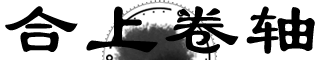
<style>
.page{position:relative;width:320px;height:60px;background:#ffffff}
.page>*{position:absolute;margin:0}
.t1{font:75px "LiSu";letter-spacing:0.075em;color:#000000}
</style>
<div class="page">
<p class="t1" style="left:5px;top:6px;width:310px;height:48px">合上卷轴</p>
</div>
